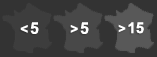
<style>
.page{position:relative;width:157px;height:57px;background:#333333}
.page>*{position:absolute;margin:0}
.t1{font:14px "Arial-BoldMT";color:#ffffff}
.t2{font:16px "Arial-BoldMT";color:#ffffff}
.t3{font:15px "Arial-BoldMT";color:#ffffff}
.t4{font:13px "Arial-BoldMT";color:#ffffff}
</style>
<div class="page">
<p class="t1" style="left:20px;top:22px;width:19px;height:12px">&lt; <span class="t2">5</span></p>
<p class="t1" style="left:70px;top:22px;width:19px;height:12px">&gt; <span class="t2">5</span></p>
<p class="t3" style="left:118px;top:22px;width:26px;height:12px"><span class="t4">&gt; </span>15</p>
</div>
